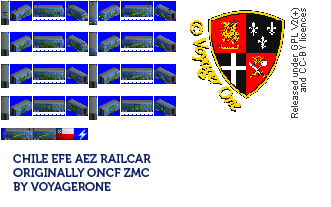
<style>
.page{position:relative;width:331px;height:207px;background:#ffffff}
.page>*{position:absolute;margin:0}
.t1{font:12px "Museo700-Regular";color:#0c2468;text-transform:uppercase}
</style>
<div class="page">
<p class="t1" style="left:13px;top:154px;width:138px;height:37px">chile efe aez railcar<br>originally oncf zmc<br>by voyagerone</p>
</div>
